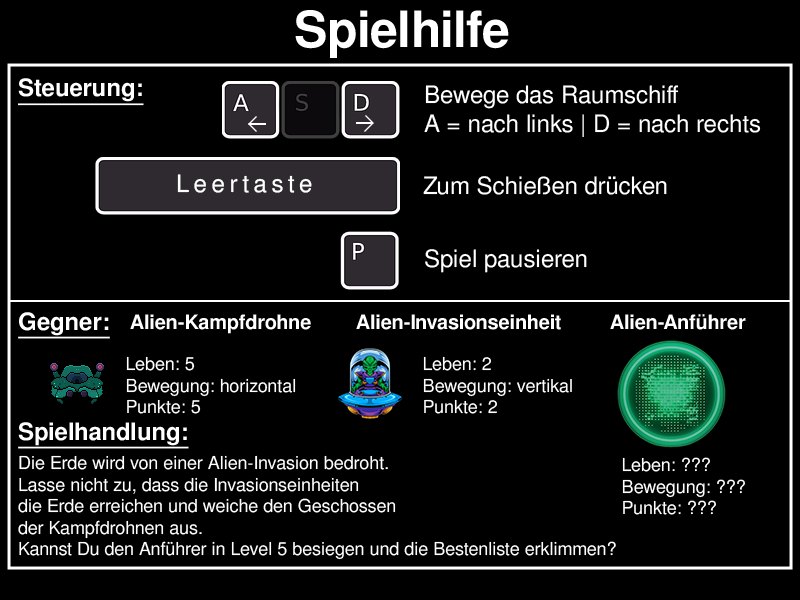
<style>
.page{position:relative;width:800px;height:600px;background:#000000}
.page>*{position:absolute;margin:0}
.t1{font:50px "FreeSansBold";color:#ffffff}
.t2{font:24px "FreeSansBold";color:#ffffff;text-decoration:underline}
.t3{font:24px "FreeSans";color:#ffffff}
.t4{font:24px "FreeSans";letter-spacing:0.2em;color:#ffffff}
.t5{font:20px "FreeSansBold";color:#ffffff}
.t6{font:18px "FreeSans";color:#ffffff}
</style>
<div class="page">
<p class="t1" style="left:295px;top:10px;width:214px;height:48px">Spielhilfe</p>
<p class="t2" style="left:18px;top:78px;width:126px;height:28px">Steuerung:</p>
<p class="t3" style="left:424px;top:85px;width:337px;height:52px">Bewege das Raumschiff <br>A = nach links | D = nach rechts</p>
<p class="t4" style="left:177px;top:174px;width:135px;height:19px">Leertaste</p>
<p class="t3" style="left:423px;top:176px;width:244px;height:19px">Zum Schießen drücken</p>
<p class="t3" style="left:425px;top:249px;width:162px;height:24px">Spiel pausieren</p>
<p class="t2" style="left:18px;top:312px;width:92px;height:27px">Gegner:</p>
<p class="t5" style="left:130px;top:314px;width:181px;height:20px">Alien-Kampfdrohne</p>
<p class="t5" style="left:356px;top:314px;width:205px;height:16px">Alien-Invasionseinheit</p>
<p class="t5" style="left:610px;top:314px;width:136px;height:16px">Alien-Anführer</p>
<p class="t6" style="left:126px;top:356px;width:170px;height:58px">Leben: 5<br>Bewegung: horizontal<br>Punkte: 5</p>
<p class="t6" style="left:423px;top:356px;width:149px;height:58px">Leben: 2<br>Bewegung: vertikal<br>Punkte: 2</p>
<p class="t2" style="left:18px;top:422px;width:171px;height:27px">Spielhandlung:</p>
<p class="t6" style="left:18px;top:455px;width:598px;height:105px">Die Erde wird von einer Alien-Invasion bedroht. <br>Lasse nicht zu, dass die Invasionseinheiten <br>die Erde erreichen und weiche den Geschossen <br>der Kampfdrohnen aus. <br>Kannst Du den Anführer in Level 5 besiegen und die Bestenliste erklimmen?</p>
<p class="t6" style="left:622px;top:457px;width:123px;height:58px">Leben: ???<br>Bewegung: ???<br>Punkte: ???</p>
</div>
